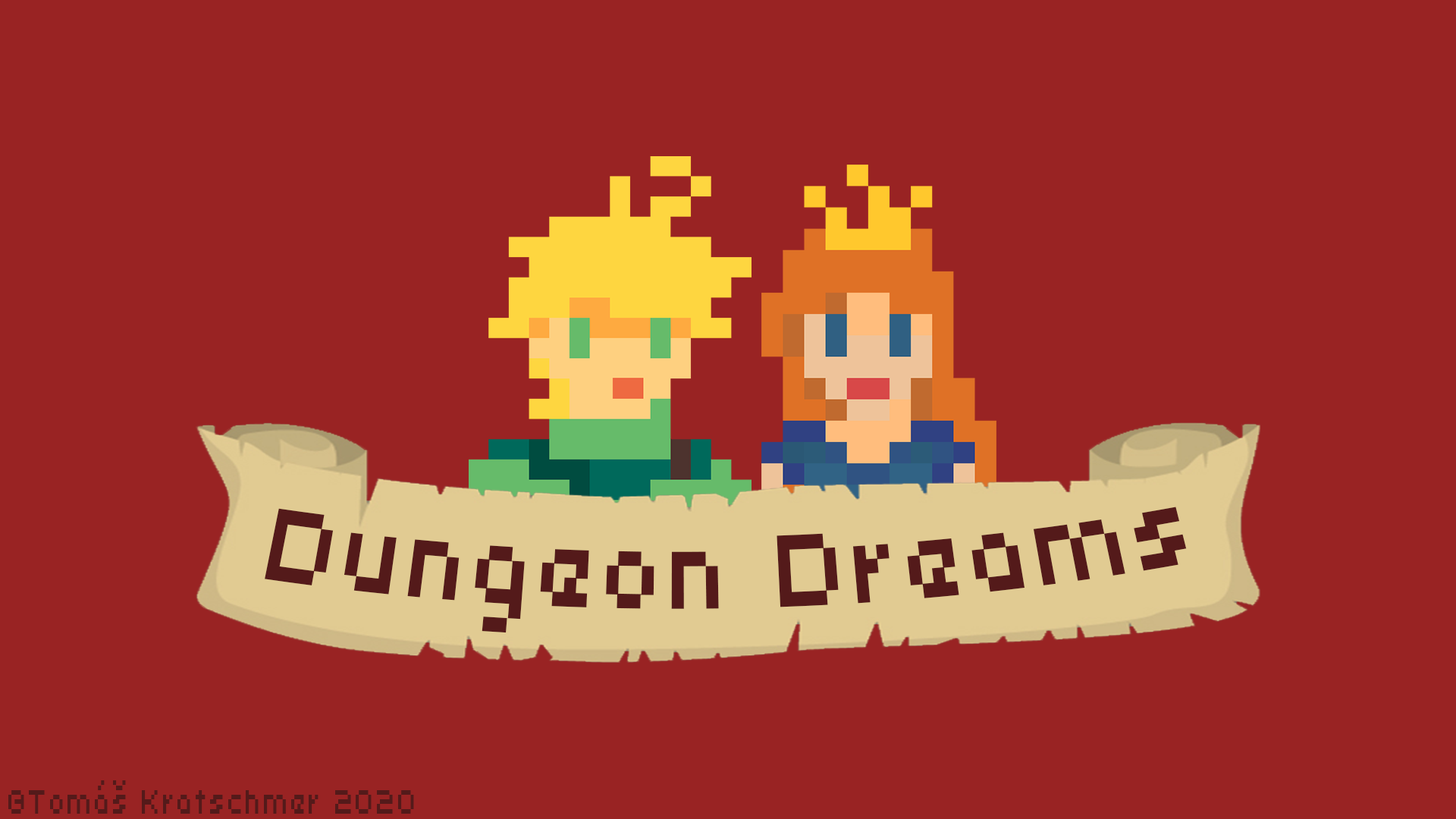
<style>
.page{position:relative;width:1456px;height:819px;background:#992323}
.page>*{position:absolute;margin:0}
.t1{font:113.8px "Uni0553";letter-spacing:0.08em;color:#541a1a;scale:0.78 1}
.t2{font:37.9px "Uni0553";letter-spacing:0.08em;color:#541a1a;scale:0.67 1}
</style>
<div class="page">
<p class="t1" style="left:265px;top:507px;width:922px;height:126px;rotate:-1deg">Dungeon Dreams</p>
<p class="t2" style="left:8px;top:780px;width:406px;height:34px">©Tomáš Kratschmer 2020</p>
</div>
